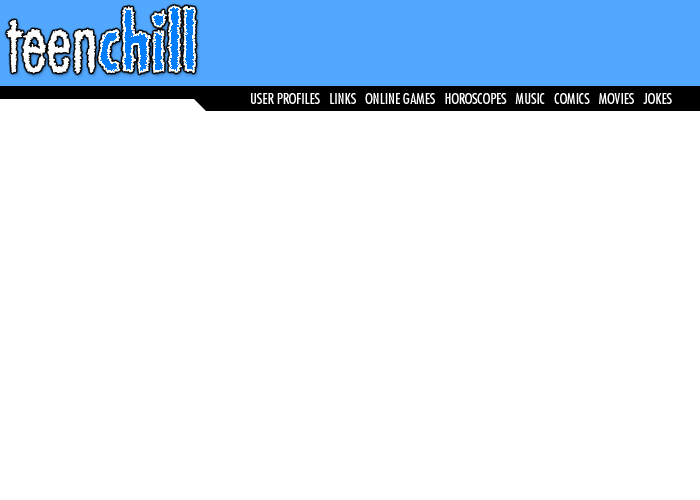
<style>
.page{position:relative;width:700px;height:500px;background:#ffffff}
.page>*{position:absolute;margin:0}
.t1{font:15px "Futura-Condensed";color:#ffffff}
</style>
<div class="page">
<p class="t1" style="left:251px;top:93px;width:421px;height:11px">USER PROFILES   LINKS   ONLINE GAMES   HOROSCOPES   MUSIC   COMICS   MOVIES   JOKES</p>
</div>
